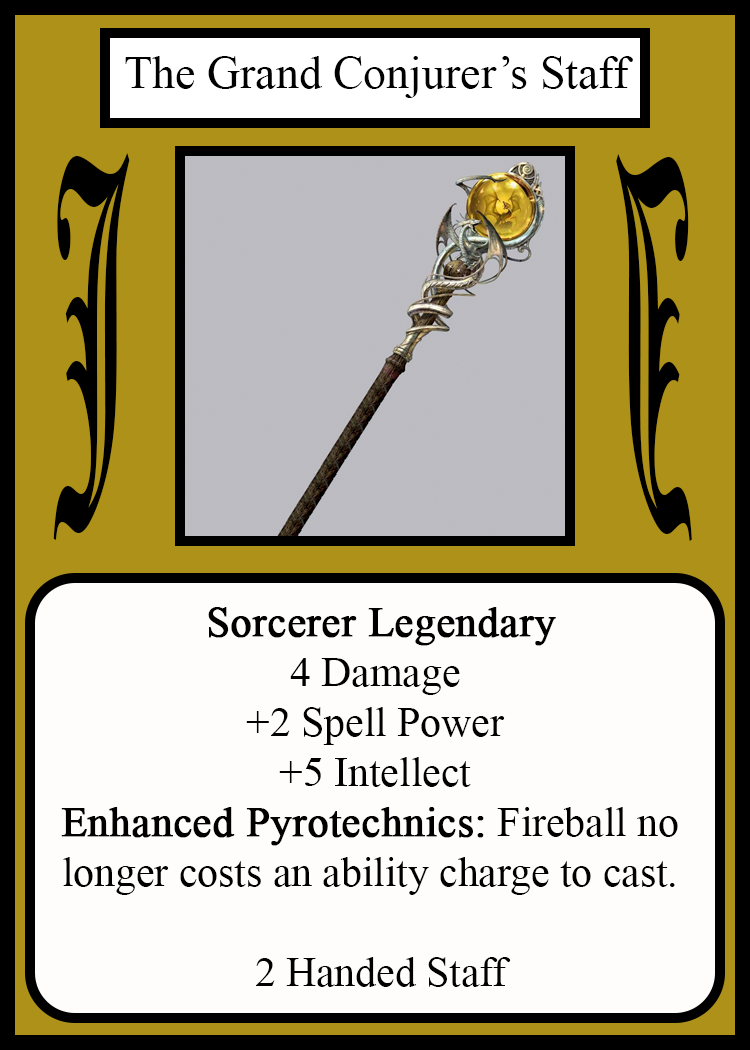
<style>
.page{position:relative;width:750px;height:1050px;background:#fffcfc}
.page>*{position:absolute;margin:0}
.t1{font:45.8px "TimesNewRomanPSMT";color:#010101}
.t2{font:450.1px "OldEnglishTextMT";color:#000000;scale:0.26 1}
.t3{font:449.7px "OldEnglishTextMT";color:#000000;scale:0.26 1}
.t4{font:41.7px "TimesNewRomanPSMT";color:#000000}
.t5{font:41.7px "TimesNewRomanPSMT";color:#000000;font-weight:bold}
</style>
<div class="page">
<p class="t1" style="left:125px;top:56px;width:508px;height:42px">The Grand Conjurer’s Staff</p>
<p class="t2" style="left:53px;top:153px;width:77px;height:387px">J</p>
<p class="t3" style="left:616px;top:154px;width:76px;height:387px;rotate:180deg">J</p>
<p class="t4" style="left:61px;top:607px;width:617px;height:380px;text-align:center"><span class="t5"> Sorcerer Legendary<br></span>4 Damage<br>+2 Spell Power<br>+5 Intellect<br><span class="t5">Enhanced Pyrotechnics:</span> Fireball no <br>longer costs an ability charge to cast. <br><br> 2 Handed Staff</p>
</div>
